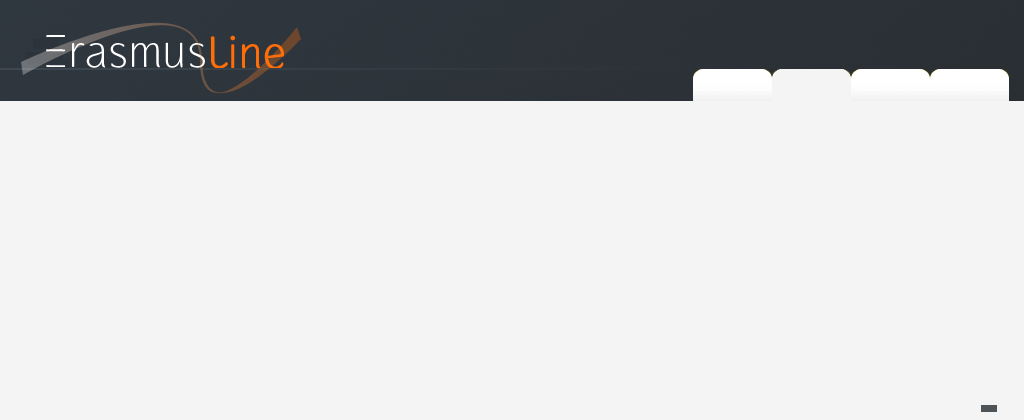
<style>
.page{position:relative;width:1024px;height:420px;background:#f4f4f4}
.page>*{position:absolute;margin:0}
.t1{font:48.1px "GauntletThin";color:#ffffff}
.t2{font:48.1px "GauntletClassic";color:#ff6d06}
</style>
<div class="page">
<p class="t1" style="left:46px;top:35px;width:159px;height:33px">Erasmus</p>
<p class="t2" style="left:210px;top:35px;width:74px;height:35px">Line</p>
</div>
